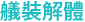
<style>
.page{position:relative;width:85px;height:22px;background:#ffffff}
.page>*{position:absolute;margin:0}
.t1{font:21px "GothicMB101Pro-Medium";color:#1dbcc0}
</style>
<div class="page">
<p class="t1" style="left:0px;top:1px;width:84px;height:20px">艤裝解體</p>
</div>
